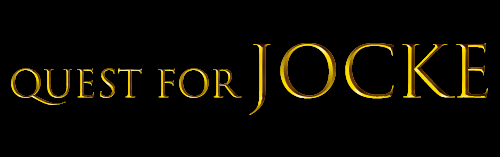
<style>
.page{position:relative;width:500px;height:157px;background:#000000}
.page>*{position:absolute;margin:0}
.t1{font:37px "TrajanColor-Concept"}
.t2{font:70.3px "TrajanColor-Concept"}
</style>
<div class="page">
<p class="t1" style="left:11px;top:43px;width:477px;height:72px">quest for <span class="t2">jocke</span></p>
</div>
